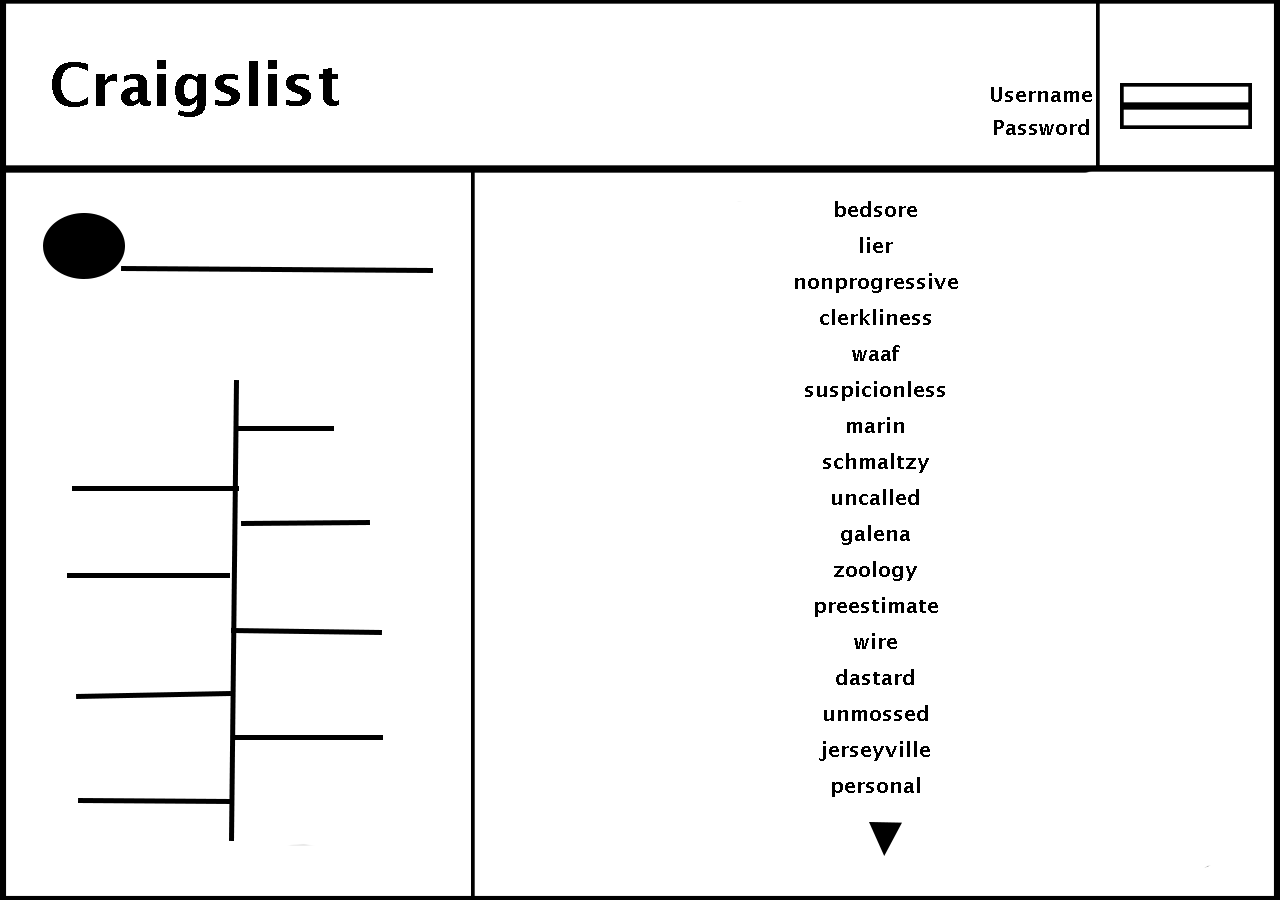
<style>
.page{position:relative;width:1280px;height:900px;background:#ffffff}
.page>*{position:absolute;margin:0}
.t1{font:20px/36px "LucidaSans-Demi";color:#000000}
</style>
<div class="page">
<p class="t1" style="left:795px;top:201px;width:163px;height:596px;text-align:center">bedsore<br>lier<br>nonprogressive<br>clerkliness<br>waaf<br>suspicionless<br>marin<br>schmaltzy<br>uncalled<br>galena<br>zoology<br>preestimate<br>wire<br>dastard<br>unmossed<br>jerseyville<br>personal</p>
</div>
